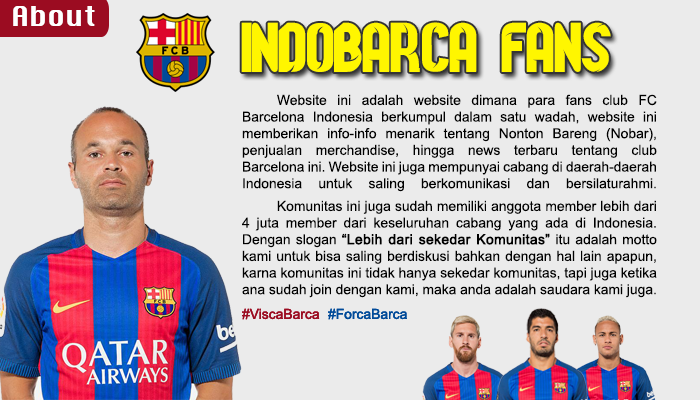
<style>
.page{position:relative;width:700px;height:400px;background:#ebebeb}
.page>*{position:absolute;margin:0}
.t1{font:27.2px "Chicago";color:#ffffff}
.t2{font:83.2px "Barcelona-2013-Regular";color:#fff600}
.t3{font:13.9px "ArialMT";color:#000000}
.t4{font:13.9px "ArialMT";color:#000000;font-weight:bold}
</style>
<div class="page">
<p class="t1" style="left:13px;top:6px;width:82px;height:20px">About</p>
<p class="t2" style="left:241px;top:22px;width:236px;height:50px">INDOBARCA</p>
<p class="t2" style="left:501px;top:22px;width:110px;height:50px">FANS</p>
<p class="t3" style="left:242px;top:94px;width:415px;height:98px;text-align:justify">Website ini adalah website dimana para fans club FC Barcelona Indonesia berkumpul dalam satu wadah, website ini memberikan info-info menarik tentang Nonton Bareng (Nobar), penjualan merchandise, hingga news terbaru tentang club Barcelona ini. Website ini juga mempunyai cabang di daerah-daerah Indonesia untuk saling berkomunikasi dan bersilaturahmi.</p>
<p class="t3" style="left:242px;top:200px;width:415px;height:98px;text-align:justify">Komunitas ini juga sudah memiliki anggota member lebih dari 4 juta member dari keseluruhan cabang yang ada di Indonesia. Dengan slogan <span class="t4">“Lebih dari sekedar Komunitas”</span> itu adalah motto kami untuk bisa saling berdiskusi bahkan dengan hal lain apapun, karna komunitas ini tidak hanya sekedar komunitas, tapi juga ketika ana sudah join dengan kami, maka anda adalah saudara kami juga.</p>
</div>
